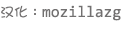
<style>
.page{position:relative;width:122px;height:29px;background:#ffffff}
.page>*{position:absolute;margin:0}
.t1{font:16px "YaHei-Consolas-Hybrid";color:#727070}
.t2{font:14px "DFGirl";color:#727070}
</style>
<div class="page">
<p class="t1" style="left:1px;top:5px;width:120px;height:16px"><span class="t2">汉化：</span>mozillazg</p>
</div>
